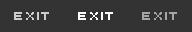
<style>
.page{position:relative;width:192px;height:32px;background:#333333}
.page>*{position:absolute;margin:0}
.t1{font:12.7px "Uni0554";color:#cdcdcd}
.t2{font:12.7px "Uni0554";color:#ffffff}
.t3{font:12.7px "Uni0554";color:#a5a5a5}
</style>
<div class="page">
<p class="t1" style="left:14px;top:12px;width:35px;height:8px">EXIT</p>
<p class="t2" style="left:78px;top:12px;width:35px;height:8px">EXIT</p>
<p class="t3" style="left:142px;top:12px;width:35px;height:8px">EXIT</p>
</div>
